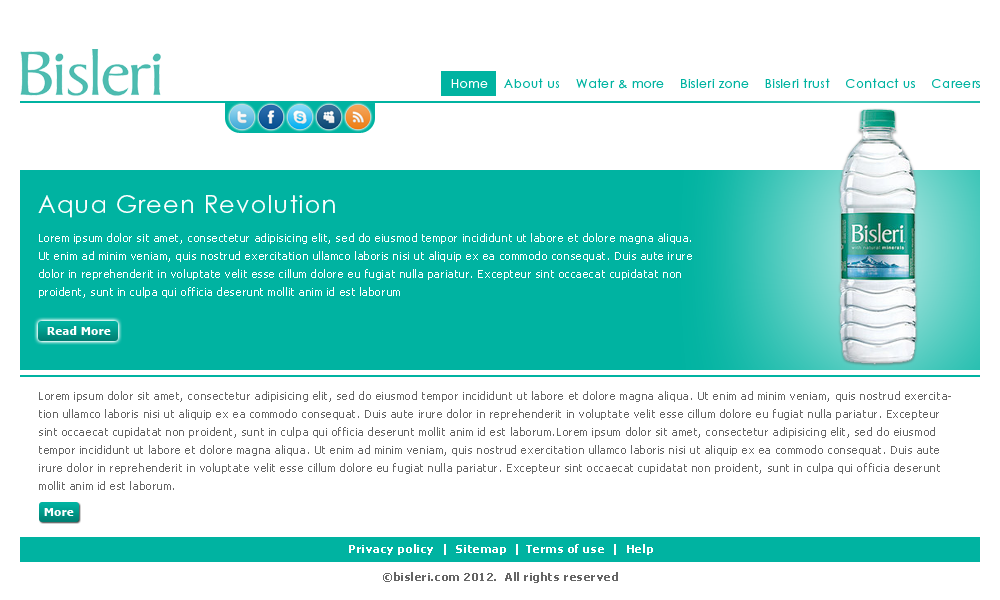
<style>
.page{position:relative;width:1000px;height:600px;background:#ffffff}
.page>*{position:absolute;margin:0}
.t1{font:12px "CenturyGothicStd";letter-spacing:0.05em;color:#00b3a1}
.t2{font:12px "CenturyGothicStd";letter-spacing:0.05em;color:#feffff}
.t3{font:24px "CenturyGothicStd";letter-spacing:0.05em;color:#feffff}
.t4{font:11px/18px "Tahoma";letter-spacing:0.05em;color:#feffff}
.t5{font:11px "Tahoma-Bold";letter-spacing:0.05em;color:#fefefe}
.t6{font:11px/18px "Tahoma";letter-spacing:0.05em;color:#666666}
.t7{font:11px "Tahoma-Bold";letter-spacing:0.05em;color:#ffffff}
.t8{font:11px "Tahoma-Bold";letter-spacing:0.05em;color:#666666}
</style>
<div class="page">
<p class="t1" style="left:451px;top:78px;width:529px;height:11px"><span class="t2">Home</span>    About us    Water &amp; more    Bisleri zone    Bisleri trust    Contact us    Careers</p>
<p class="t3" style="left:38px;top:195px;width:297px;height:23px">Aqua Green Revolution</p>
<p class="t4" style="left:39px;top:233px;width:653px;height:65px">Lorem ipsum dolor sit amet, consectetur adipisicing elit, sed do eiusmod tempor incididunt ut labore et dolore magna aliqua. Ut enim ad minim veniam, quis nostrud exercitation ullamco laboris nisi ut aliquip ex ea commodo consequat. Duis aute irure dolor in reprehenderit in voluptate velit esse cillum dolore eu fugiat nulla pariatur. Excepteur sint occaecat cupidatat non proident, sunt in culpa qui officia deserunt mollit anim id est laborum</p>
<p class="t5" style="left:47px;top:326px;width:64px;height:9px">Read More</p>
<p class="t6" style="left:39px;top:391px;width:912px;height:99px">Lorem ipsum dolor sit amet, consectetur adipisicing elit, sed do eiusmod tempor incididunt ut labore et dolore magna aliqua. Ut enim ad minim veniam, quis nostrud exercitation ullamco laboris nisi ut aliquip ex ea commodo consequat. Duis aute irure dolor in reprehenderit in voluptate velit esse cillum dolore eu fugiat nulla pariatur. Excepteur sint occaecat cupidatat non proident, sunt in culpa qui officia deserunt mollit anim id est laborum.Lorem ipsum dolor sit amet, consectetur adipisicing elit, sed do eiusmod tempor incididunt ut labore et dolore magna aliqua. Ut enim ad minim veniam, quis nostrud exercitation ullamco laboris nisi ut aliquip ex ea commodo consequat. Duis aute irure dolor in reprehenderit in voluptate velit esse cillum dolore eu fugiat nulla pariatur. Excepteur sint occaecat cupidatat non proident, sunt in culpa qui officia deserunt mollit anim id est laborum.</p>
<p class="t7" style="left:44px;top:508px;width:30px;height:8px">More</p>
<p class="t7" style="left:349px;top:544px;width:304px;height:11px">Privacy policy  |  Sitemap  | Terms of use  |  Help</p>
<p class="t8" style="left:383px;top:572px;width:235px;height:11px">©bisleri.com 2012.  All rights reserved</p>
</div>
